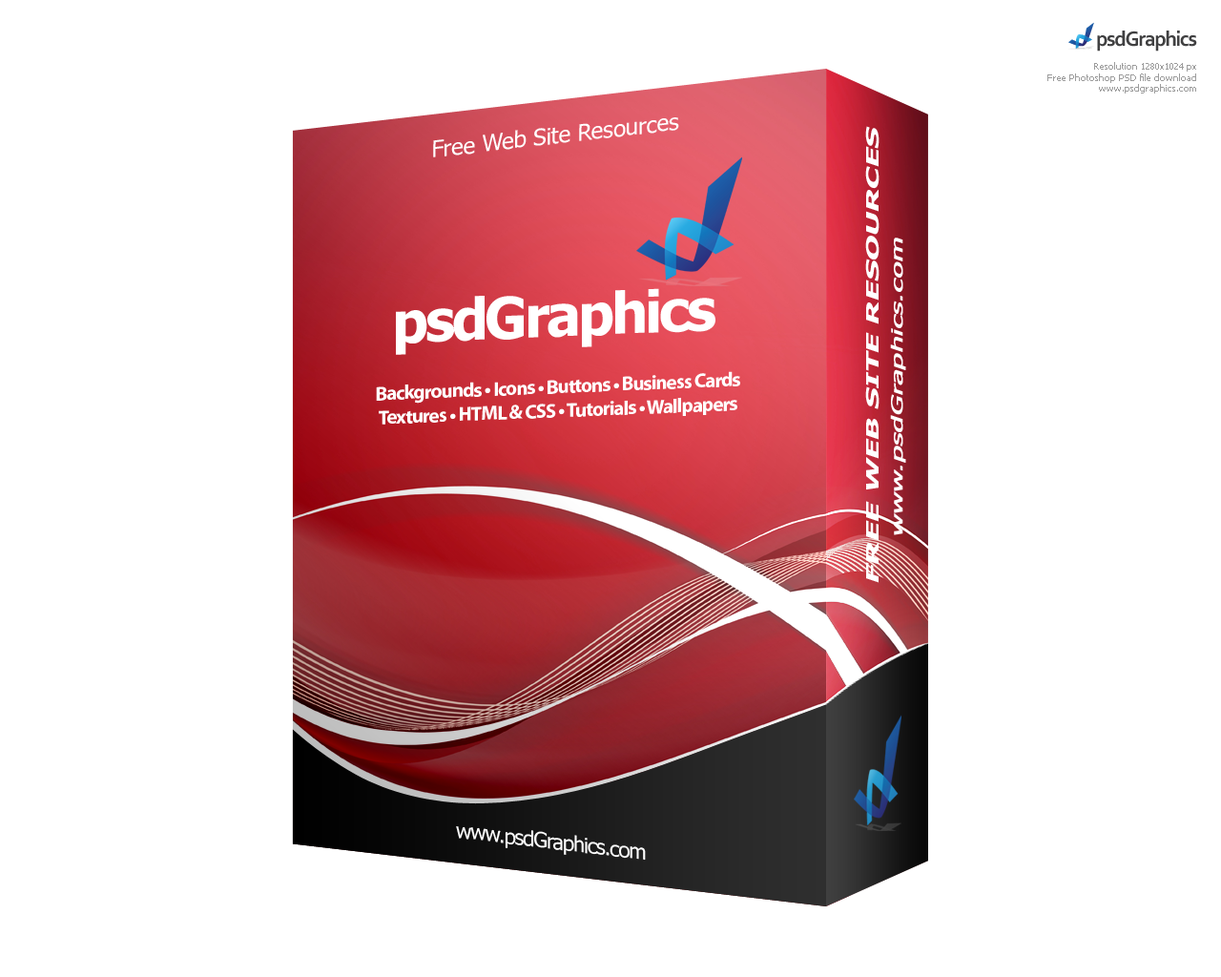
<style>
.page{position:relative;width:1221px;height:977px;background:#ffffff}
.page>*{position:absolute;margin:0}
.t1{font:9.3px "Tahoma";color:#9c9c9c}
.t2{font:22.8px "Tahoma";letter-spacing:-0.01em;color:#ffffff}
.t3{font:17.2px "Tahoma-Bold";letter-spacing:-0.01em;color:#ffffff;text-transform:uppercase;font-style:italic;scale:1.9 1}
.t4{font:15.3px "Tahoma";letter-spacing:-0.01em;color:#ffffff;font-weight:bold;font-style:italic;scale:1.9 1}
.t5{font:57.2px "Tahoma-Bold";letter-spacing:-0.05em;color:#ffffff}
.t6{font:20px "MyriadPro-Bold";letter-spacing:-0.05em;color:#ffffff}
.t7{font:21px "Tahoma";letter-spacing:-0.05em;color:#ffffff}
</style>
<div class="page">
<p class="t1" style="left:1047px;top:62px;width:149px;height:31px;text-align:right">Resolution 1280x1024 px<br>Free Photoshop PSD file download<br>www.psdgraphics.com</p>
<p class="t2" style="left:433px;top:117px;width:246px;height:40px;rotate:-7deg">Free Web Site Resources</p>
<p class="t3" style="left:865px;top:126px;width:14px;height:457px;rotate:-90deg">Free Web Site Resources</p>
<p class="t4" style="left:890px;top:237px;width:16px;height:298px;rotate:-90deg">www.psdGraphics.com</p>
<p class="t5" style="left:396px;top:288px;width:319px;height:67px;rotate:-2deg">psdGraphics</p>
<p class="t6" style="left:376px;top:371px;width:364px;height:53px;text-align:center;rotate:-2deg">Backgrounds • Icons • Buttons • Business Cards<br>Textures • HTML &amp; CSS • Tutorials • Wallpapers</p>
<p class="t7" style="left:456px;top:826px;width:190px;height:34px;rotate:7deg">www.psdGraphics.com</p>
</div>
